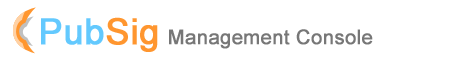
<style>
.page{position:relative;width:449px;height:62px;background:#ffffff}
.page>*{position:absolute;margin:0}
.t1{font:20px "ArialMT";color:#777777;font-weight:bold}
.t2{font:36px "ArialMT";color:#63c9fe;font-weight:bold}
.t3{font:36px "ArialMT";color:#ff962f;font-weight:bold}
</style>
<div class="page">
<p class="t1" style="left:41px;top:17px;width:332px;height:35px"><span class="t2">Pub</span><span class="t3">Sig </span>Management Console</p>
</div>
